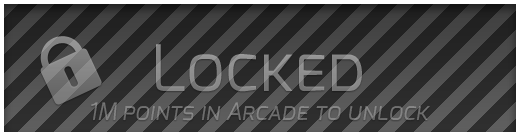
<style>
.page{position:relative;width:520px;height:136px}
.page>*{position:absolute;margin:0}
.t1{font:24px "Exo-Italic";color:#848484;font-variant:small-caps}
.t2{font:64px "Exo-Regular";color:#848484;font-variant:small-caps}
.t3{font:24px "Exo-Italic";color:#848484}
</style>
<div class="page">
<p class="t1" style="left:91px;top:44px;width:339px;height:77px;text-align:center"><span class="t2">Locked<br></span><span class="t3">1</span>M points in Arcade to unlock</p>
</div>
